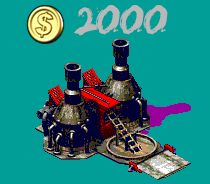
<style>
.page{position:relative;width:210px;height:184px;background:#009e96}
.page>*{position:absolute;margin:0}
.t1{font:36px "LeviBrush";color:#b8b8b8}
</style>
<div class="page">
<p class="t1" style="left:74px;top:5px;width:94px;height:31px">2000</p>
</div>
